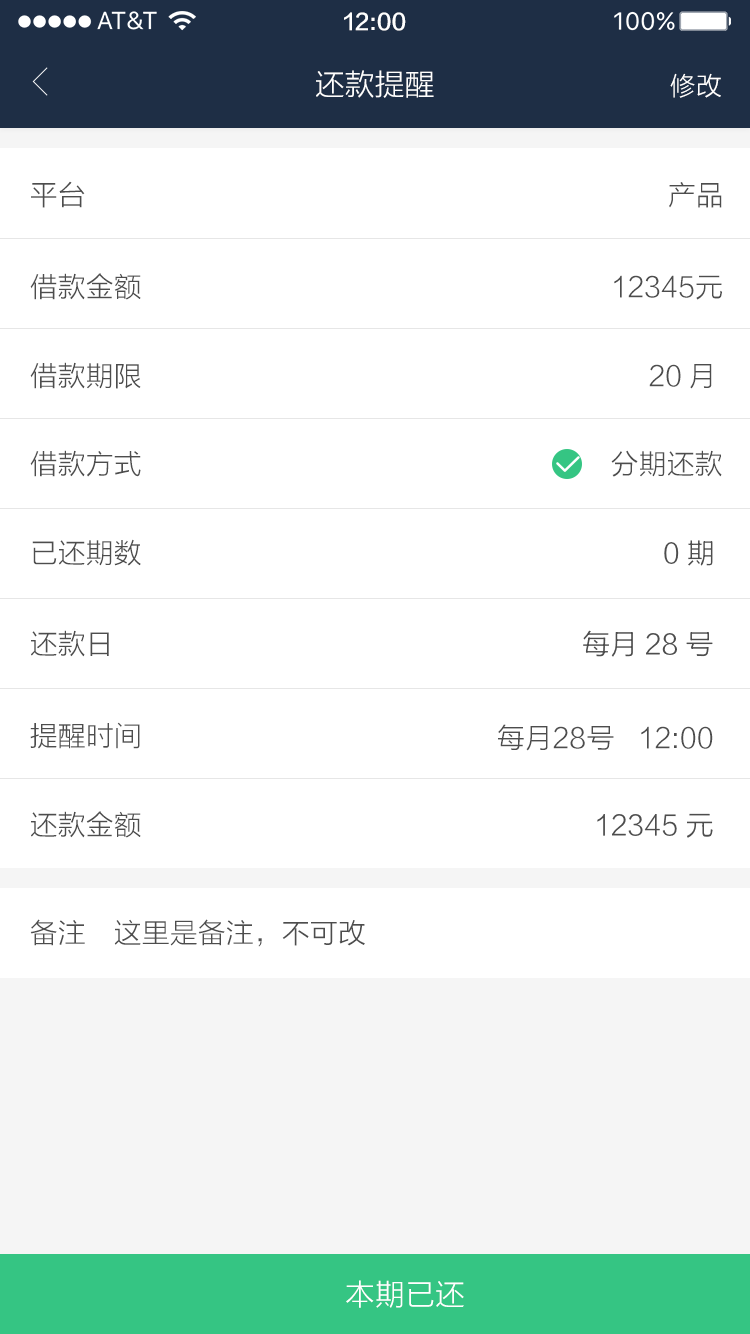
<style>
.page{position:relative;width:750px;height:1334px;background:#ffffff}
.page>*{position:absolute;margin:0}
.t1{font:22px "FZLTZHK--GBK1-0";color:#ffffff}
.t2{font:30px "FZLTXHK";color:#ffffff}
.t3{font:26px "FZLTXHK";color:#ffffff}
.t4{font:28px "FZLTXHK";color:#4d4d4d}
</style>
<div class="page">
<p class="t1" style="left:344px;top:12px;width:62px;height:19px">12:00</p>
<p class="t2" style="left:316px;top:70px;width:118px;height:28px">还款提醒</p>
<p class="t3" style="left:670px;top:73px;width:51px;height:25px">修改</p>
<p class="t4" style="left:31px;top:181px;width:54px;height:27px">平台</p>
<p class="t4" style="left:669px;top:182px;width:53px;height:26px">产品</p>
<p class="t4" style="left:30px;top:273px;width:111px;height:27px">借款金额</p>
<p class="t4" style="left:614px;top:275px;width:108px;height:25px">12345元</p>
<p class="t4" style="left:30px;top:362px;width:111px;height:27px">借款期限</p>
<p class="t4" style="left:649px;top:364px;width:32px;height:23px">20</p>
<p class="t4" style="left:690px;top:364px;width:22px;height:25px">月</p>
<p class="t4" style="left:30px;top:450px;width:111px;height:27px">借款方式</p>
<p class="t4" style="left:611px;top:450px;width:111px;height:27px">分期还款</p>
<p class="t4" style="left:32px;top:539px;width:109px;height:27px">已还期数</p>
<p class="t4" style="left:664px;top:540px;width:49px;height:26px">0期</p>
<p class="t4" style="left:31px;top:630px;width:78px;height:27px">还款日</p>
<p class="t4" style="left:583px;top:630px;width:130px;height:27px">每月28号</p>
<p class="t4" style="left:30px;top:722px;width:110px;height:27px">提醒时间</p>
<p class="t4" style="left:498px;top:724px;width:215px;height:27px">每月28号   12:00</p>
<p class="t4" style="left:31px;top:811px;width:110px;height:27px">还款金额</p>
<p class="t4" style="left:597px;top:813px;width:116px;height:25px">12345元</p>
<p class="t4" style="left:30px;top:919px;width:55px;height:27px">备注</p>
<p class="t4" style="left:114px;top:919px;width:251px;height:28px">这里是备注，不可改</p>
<p class="t2" style="left:346px;top:1280px;width:118px;height:28px">本期已还</p>
</div>
